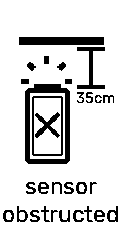
<style>
.page{position:relative;width:122px;height:250px;background:#ffffff}
.page>*{position:absolute;margin:0}
.t1{font:15px "Rubik-Regular";color:#000000}
.t2{font:22.8px "Rubik-Regular";color:#000000}
</style>
<div class="page">
<p class="t1" style="left:77px;top:92px;width:37px;height:11px">35cm</p>
<p class="t2" style="left:3px;top:182px;width:115px;height:40px;text-align:center">sensor<br>obstructed</p>
</div>
